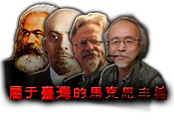
<style>
.page{position:relative;width:174px;height:140px;background:#ffffff}
.page>*{position:absolute;margin:0}
.t1{font:16.1px "FZZJ-MSHLFW"}
</style>
<div class="page">
<p class="t1" style="left:8px;top:86px;width:160px;height:15px">属于台湾的马克思主义</p>
</div>
